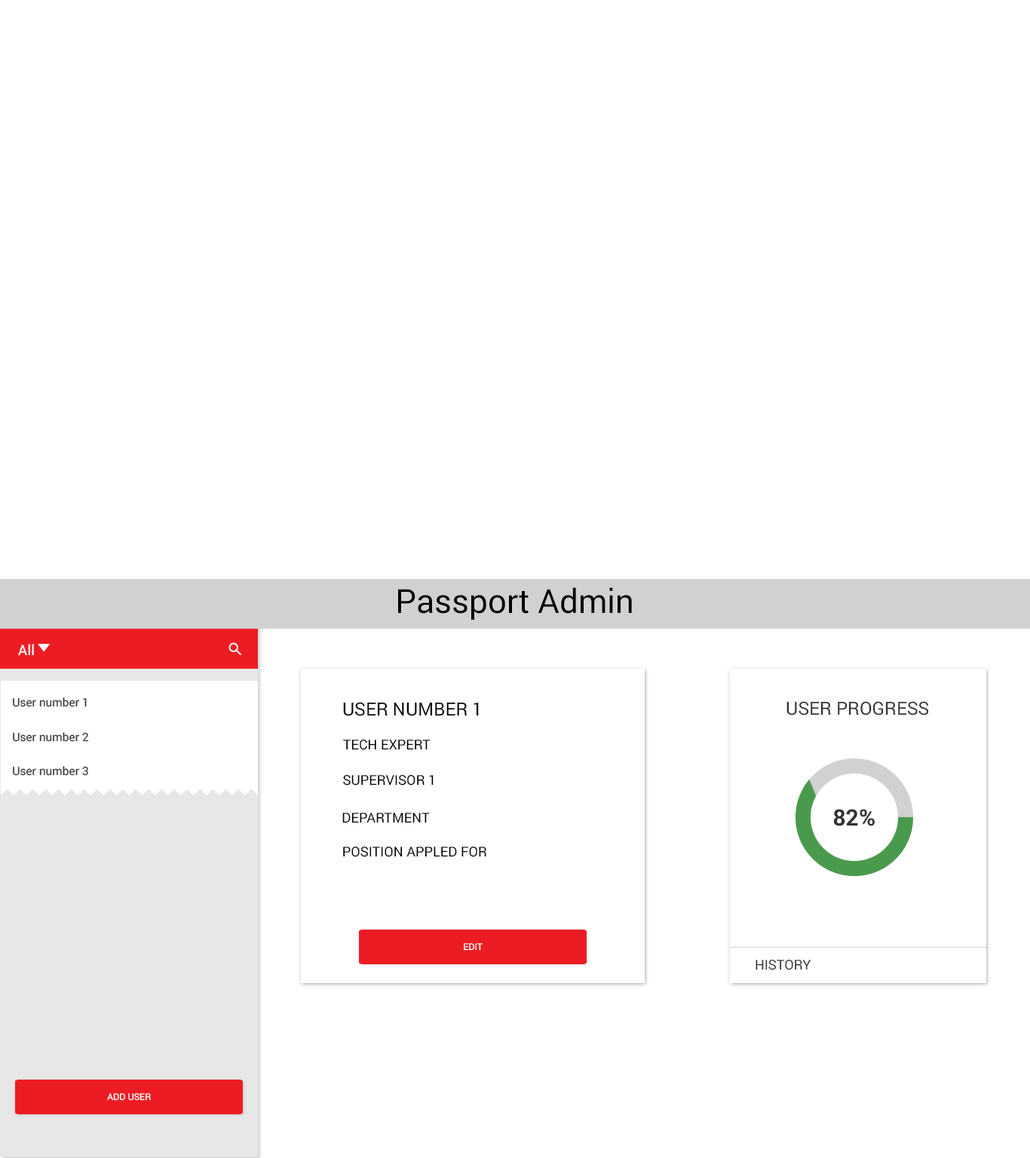
<style>
.page{position:relative;width:1030px;height:1158px;background:#ffffff}
.page>*{position:absolute;margin:0}
.t1{font:33.2px "Roboto-Regular";color:#000000}
.t2{font:18.1px "Roboto-Regular";color:#000000;text-transform:uppercase}
.t3{font:18.1px "Roboto-Regular";color:#333333;text-transform:uppercase}
.t4{font:13.6px "Roboto-Regular";color:#000000;text-transform:uppercase}
.t5{font:22.6px "Roboto-Bold";color:#333333;text-transform:uppercase}
.t6{font:9.1px "Roboto-Regular";color:#ffffff;text-transform:uppercase}
.t7{font:13.6px "Roboto-Regular";color:#333333;text-transform:uppercase}
</style>
<div class="page">
<p class="t1" style="left:398px;top:587px;width:234px;height:33px">Passport Admin</p>
<p class="t2" style="left:343px;top:702px;width:136px;height:14px">USER NUMBER 1</p>
<p class="t3" style="left:786px;top:701px;width:143px;height:14px">USER PROGRESS</p>
<p class="t4" style="left:343px;top:739px;width:87px;height:11px">TECH EXPERT</p>
<p class="t4" style="left:343px;top:774px;width:90px;height:12px">SUPERVISOR 1</p>
<p class="t5" style="left:833px;top:809px;width:41px;height:17px">82%</p>
<p class="t4" style="left:342px;top:813px;width:88px;height:10px">DEPARTMENT</p>
<p class="t4" style="left:343px;top:846px;width:143px;height:11px">POSITION APPLED FOR</p>
<p class="t6" style="left:464px;top:943px;width:18px;height:8px">edit</p>
<p class="t7" style="left:755px;top:959px;width:55px;height:11px">History</p>
<p class="t6" style="left:107px;top:1093px;width:44px;height:8px">add user</p>
</div>
